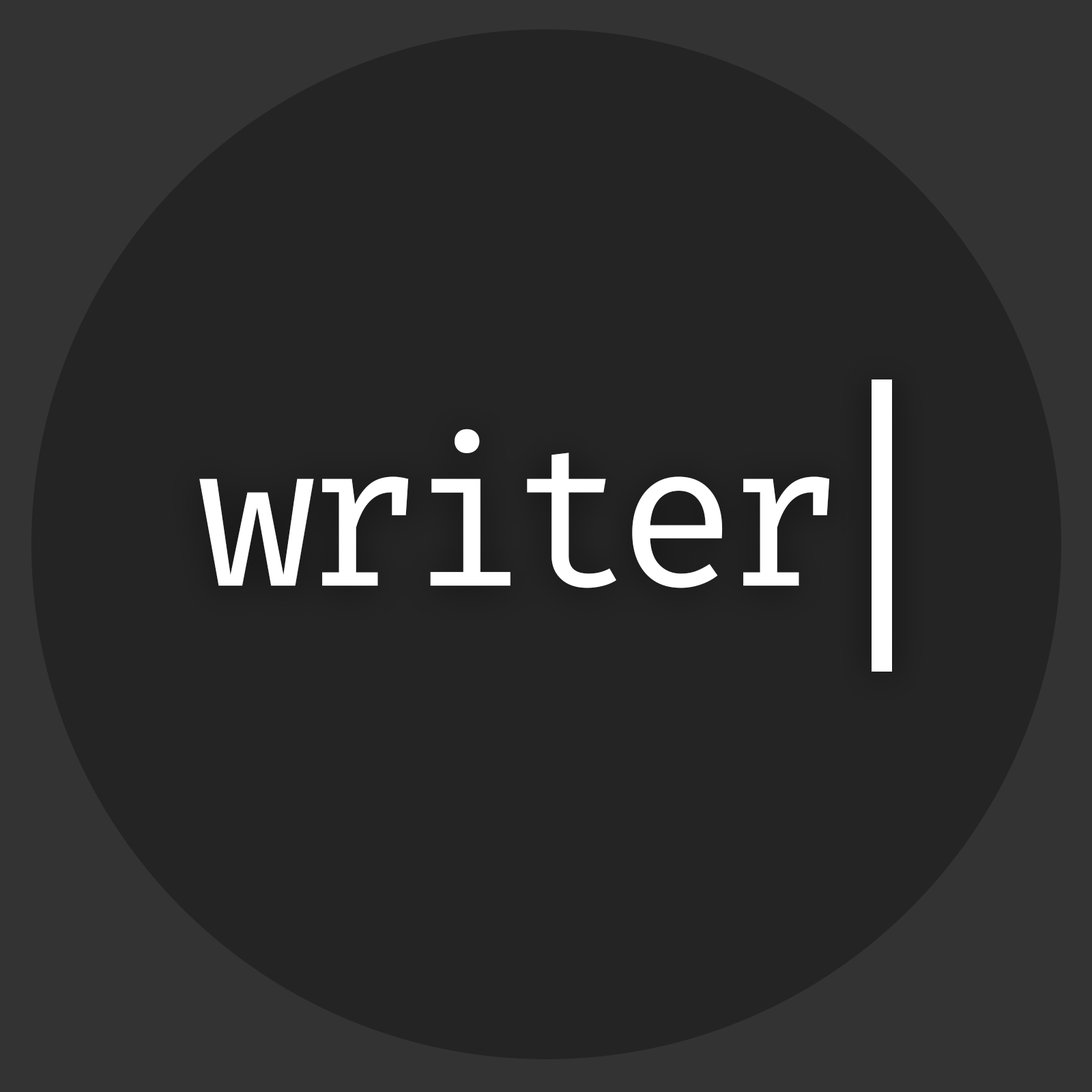
<style>
.page{position:relative;width:1092px;height:1092px;background:#242424}
.page>*{position:absolute;margin:0}
.t1{font:202.3px "FiraCode-Regular";letter-spacing:-0.08em;color:#ffffff}
</style>
<div class="page">
<p class="t1" style="left:199px;top:429px;width:631px;height:159px">writer</p>
</div>
